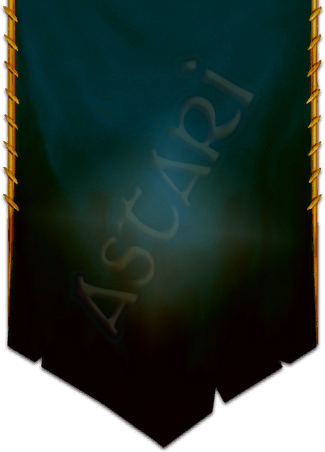
<style>
.page{position:relative;width:325px;height:452px}
.page>*{position:absolute;margin:0}
.t1{font:100px "Martel";text-transform:uppercase}
</style>
<div class="page">
<p class="t1" style="left:75px;top:59px;width:180px;height:279px;rotate:-60deg">Astari</p>
</div>
